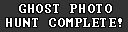
<style>
.page{position:relative;width:128px;height:32px;background:#333333}
.page>*{position:absolute;margin:0}
.t1{font:12px/14px "Terminal";letter-spacing:0.1em;color:#ffffff}
</style>
<div class="page">
<p class="t1" style="left:6px;top:4px;width:116px;height:23px;text-align:center">GHOST PHOTO<br>HUNT COMPLETE!</p>
</div>
